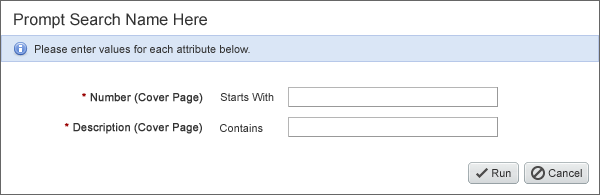
<style>
.page{position:relative;width:600px;height:196px;background:#ffffff}
.page>*{position:absolute;margin:0}
.t1{font:16px "ArialMT";letter-spacing:0.005em;color:#333333}
.t2{font:11px "ArialMT";color:#333333}
.t3{font:11px "ArialMT";color:#333333;font-weight:bold}
.t4{font:11px "ArialMT";color:#990000;font-weight:bold}
.t5{font:11px "ArialMT";color:#303030}
</style>
<div class="page">
<p class="t1" style="left:14px;top:13px;width:193px;height:16px">Prompt Search Name Here</p>
<p class="t2" style="left:35px;top:45px;width:215px;height:8px">Please enter values for each attribute below.</p>
<p class="t3" style="left:82px;top:93px;width:121px;height:11px"><span class="t4">*</span> Number (Cover Page)</p>
<p class="t2" style="left:220px;top:93px;width:54px;height:8px">Starts With</p>
<p class="t3" style="left:64px;top:123px;width:138px;height:11px"><span class="t4">*</span> Description (Cover Page)</p>
<p class="t2" style="left:220px;top:124px;width:43px;height:8px">Contains</p>
<p class="t5" style="left:492px;top:169px;width:19px;height:8px">Run</p>
<p class="t5" style="left:548px;top:169px;width:34px;height:8px">Cancel</p>
</div>
